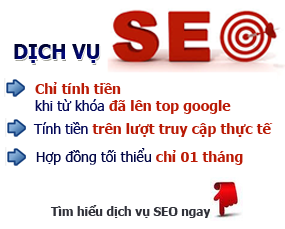
<style>
.page{position:relative;width:285px;height:229px;background:#ffffff}
.page>*{position:absolute;margin:0}
.t1{font:20px "Tahoma-Bold"}
.t2{font:14px "Tahoma-Bold";color:#ba1b06}
.t3{font:14px "Tahoma";color:#020757}
.t4{font:14px "Tahoma-Bold";color:#b91a05}
.t5{font:14px "Tahoma";color:#010645}
.t6{font:12px "Tahoma-Bold";color:#303139}
</style>
<div class="page">
<p class="t1" style="left:14px;top:44px;width:86px;height:19px">DỊCH VỤ</p>
<p class="t2" style="left:35px;top:82px;width:196px;height:32px">Chỉ tính tiền<span class="t3"> <br>khi từ khóa </span>đã lên top google</p>
<p class="t4" style="left:33px;top:122px;width:240px;height:15px"><span class="t3">Tính tiền </span>trên lượt truy cập thực tế</p>
<p class="t5" style="left:36px;top:148px;width:207px;height:17px">Hợp đồng tối thiểu <span class="t2">chỉ 01 tháng</span></p>
<p class="t6" style="left:50px;top:205px;width:161px;height:13px">Tìm hiểu dịch vụ SEO ngay</p>
</div>
